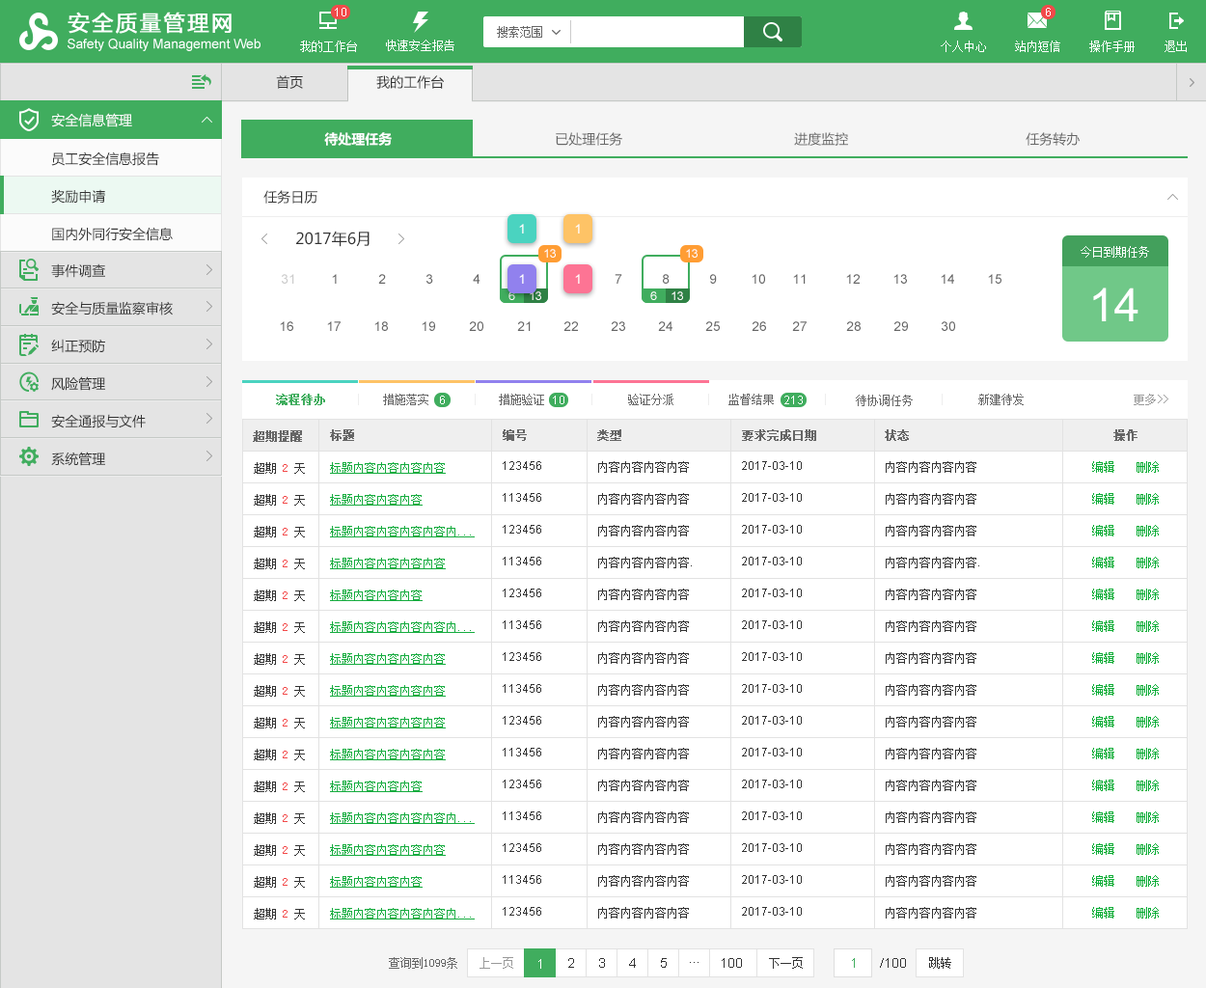
<style>
.page{position:relative;width:1206px;height:988px;background:#ffffff}
.page>*{position:absolute;margin:0}
.t1{font:13.5px "MicrosoftYaHei";color:#333333}
.t2{font:13.5px "MicrosoftYaHei";color:#ffffff}
.t3{font:13.5px "MicrosoftYaHei-Bold";color:#ffffff}
.t4{font:13.5px "MicrosoftYaHei";color:#666666}
.t5{font:13.5px/37.6px "MicrosoftYaHei";color:#333333}
.t6{font:15.4px "MicrosoftYaHei";color:#333333}
.t7{font:13.5px "ArialMT";color:#ffffff}
.t8{font:11.6px "ArialMT";color:#ffffff}
.t9{font:11.6px "SimSun";color:#ffffff}
.t10{font:13.5px "ArialMT";color:#cccccc}
.t11{font:13.5px "ArialMT";color:#666666}
.t12{font:11.6px "ArialMT";color:#fefefe}
.t13{font:46.3px "ArialMT";color:#ffffff}
.t14{font:11.6px "SimSun";color:#40ad5e;font-weight:bold}
.t15{font:11.6px "SimSun";color:#666666}
.t16{font:11.6px "SimSun";color:#999999}
.t17{font:11.6px "SimSun";color:#666666;font-weight:bold}
.t18{font:11.6px/31.9px "ArialMT";color:#333333}
.t19{font:11.6px/31.9px "SimSun";color:#333333}
.t20{font:11.6px/31.9px "SimSun";color:#09ac35}
.t21{font:11.6px/31.9px "SimSun";color:#f24a4a}
.t22{font:11.6px/31.9px "SimSun";color:#16ac3f;text-decoration:underline}
.t23{font:13.5px "ArialMT";color:#333333}
.t24{font:11.6px "SimSun";color:#333333}
.t25{font:13.5px "ArialMT";color:#40ad5e}
</style>
<div class="page">
<p class="t1" style="left:276px;top:75px;width:27px;height:14px">首页</p>
<p class="t1" style="left:376px;top:75px;width:68px;height:14px">我的工作台</p>
<p class="t2" style="left:51px;top:113px;width:81px;height:14px">安全信息管理</p>
<p class="t3" style="left:324px;top:132px;width:68px;height:14px">待处理任务</p>
<p class="t4" style="left:556px;top:132px;width:67px;height:14px">已处理任务</p>
<p class="t4" style="left:794px;top:132px;width:54px;height:14px">进度监控</p>
<p class="t4" style="left:1026px;top:132px;width:54px;height:14px">任务转办</p>
<p class="t5" style="left:51px;top:152px;width:122px;height:89px">员工安全信息报告<br>奖励申请<br>国内外同行安全信息</p>
<p class="t1" style="left:263px;top:190px;width:55px;height:14px">任务日历</p>
<p class="t6" style="left:296px;top:231px;width:74px;height:16px">2017年6月</p>
<p class="t7" style="left:519px;top:224px;width:5px;height:10px">1</p>
<p class="t7" style="left:575px;top:224px;width:5px;height:10px">1</p>
<p class="t8" style="left:544px;top:249px;width:12px;height:9px">13</p>
<p class="t8" style="left:686px;top:249px;width:12px;height:9px">13</p>
<p class="t9" style="left:1081px;top:246px;width:69px;height:12px">今日到期任务</p>
<p class="t5" style="left:51px;top:263px;width:122px;height:203px">事件调查<br>安全与质量监察审核<br>纠正预防<br>风险管理<br>安全通报与文件<br>系统管理</p>
<p class="t10" style="left:282px;top:274px;width:12px;height:10px">31</p>
<p class="t11" style="left:332px;top:274px;width:5px;height:10px">1</p>
<p class="t11" style="left:378px;top:274px;width:8px;height:10px">2</p>
<p class="t11" style="left:427px;top:274px;width:6px;height:10px">3</p>
<p class="t11" style="left:473px;top:274px;width:8px;height:10px">4</p>
<p class="t7" style="left:519px;top:274px;width:5px;height:10px">1</p>
<p class="t7" style="left:575px;top:274px;width:5px;height:10px">1</p>
<p class="t11" style="left:615px;top:274px;width:8px;height:10px">7</p>
<p class="t11" style="left:663px;top:274px;width:7px;height:10px">8</p>
<p class="t11" style="left:710px;top:274px;width:7px;height:10px">9</p>
<p class="t11" style="left:752px;top:274px;width:13px;height:10px">10</p>
<p class="t11" style="left:793px;top:274px;width:13px;height:10px">11</p>
<p class="t11" style="left:846px;top:274px;width:14px;height:10px">12</p>
<p class="t11" style="left:894px;top:274px;width:13px;height:10px">13</p>
<p class="t11" style="left:941px;top:274px;width:14px;height:10px">14</p>
<p class="t11" style="left:988px;top:274px;width:14px;height:10px">15</p>
<p class="t12" style="left:509px;top:291px;width:6px;height:9px">6</p>
<p class="t8" style="left:530px;top:291px;width:11px;height:9px">13</p>
<p class="t8" style="left:651px;top:291px;width:6px;height:9px">6</p>
<p class="t8" style="left:672px;top:291px;width:11px;height:9px">13</p>
<p class="t13" style="left:1094px;top:288px;width:45px;height:33px">14</p>
<p class="t11" style="left:280px;top:321px;width:13px;height:10px">16</p>
<p class="t11" style="left:327px;top:321px;width:14px;height:10px">17</p>
<p class="t11" style="left:374px;top:321px;width:14px;height:10px">18</p>
<p class="t11" style="left:422px;top:321px;width:13px;height:10px">19</p>
<p class="t11" style="left:469px;top:321px;width:15px;height:10px">20</p>
<p class="t11" style="left:517px;top:321px;width:14px;height:10px">21</p>
<p class="t11" style="left:564px;top:321px;width:14px;height:10px">22</p>
<p class="t11" style="left:611px;top:321px;width:14px;height:10px">23</p>
<p class="t11" style="left:658px;top:321px;width:15px;height:10px">24</p>
<p class="t11" style="left:706px;top:321px;width:14px;height:10px">25</p>
<p class="t11" style="left:752px;top:321px;width:14px;height:10px">26</p>
<p class="t11" style="left:792px;top:321px;width:15px;height:10px">27</p>
<p class="t11" style="left:846px;top:321px;width:15px;height:10px">28</p>
<p class="t11" style="left:894px;top:321px;width:14px;height:10px">29</p>
<p class="t11" style="left:942px;top:321px;width:14px;height:10px">30</p>
<p class="t14" style="left:276px;top:394px;width:49px;height:11px">流程待办</p>
<p class="t15" style="left:383px;top:394px;width:46px;height:11px">措施落实</p>
<p class="t8" style="left:440px;top:396px;width:5px;height:8px">6</p>
<p class="t15" style="left:499px;top:394px;width:45px;height:11px">措施验证</p>
<p class="t8" style="left:553px;top:396px;width:12px;height:8px">10</p>
<p class="t15" style="left:628px;top:394px;width:46px;height:11px">验证分派</p>
<p class="t15" style="left:729px;top:394px;width:45px;height:11px">监督结果</p>
<p class="t8" style="left:785px;top:396px;width:18px;height:8px">213</p>
<p class="t15" style="left:856px;top:395px;width:57px;height:11px">待协调任务</p>
<p class="t15" style="left:979px;top:394px;width:45px;height:11px">新建待发</p>
<p class="t16" style="left:1134px;top:394px;width:35px;height:11px">更多&gt;&gt;</p>
<p class="t17" style="left:253px;top:430px;width:49px;height:12px">超期提醒</p>
<p class="t17" style="left:330px;top:430px;width:24px;height:11px">标题</p>
<p class="t17" style="left:503px;top:430px;width:24px;height:11px">编号</p>
<p class="t17" style="left:597px;top:430px;width:25px;height:11px">类型</p>
<p class="t17" style="left:742px;top:430px;width:75px;height:11px">要求完成日期</p>
<p class="t17" style="left:885px;top:430px;width:24px;height:11px">状态</p>
<p class="t17" style="left:1114px;top:430px;width:24px;height:11px">操作</p>
<p class="t18" style="left:503px;top:461px;width:38px;height:455px">123456<br>113456<br>123456<br>113456<br>123456<br>113456<br>123456<br>113456<br>123456<br>113456<br>123456<br>113456<br>123456<br>113456<br>123456</p>
<p class="t19" style="left:598px;top:461px;width:94px;height:458px">内容内容内容内容<br>内容内容内容内容<br>内容内容内容内容<br>内容内容内容内容.<br>内容内容内容内容<br>内容内容内容内容<br>内容内容内容内容<br>内容内容内容内容<br>内容内容内容内容<br>内容内容内容内容<br>内容内容内容内容<br>内容内容内容内容<br>内容内容内容内容<br>内容内容内容内容<br>内容内容内容内容</p>
<p class="t18" style="left:742px;top:461px;width:60px;height:455px">2017-03-10 <br>2017-03-10 <br>2017-03-10 <br>2017-03-10 <br>2017-03-10 <br>2017-03-10 <br>2017-03-10 <br>2017-03-10 <br>2017-03-10 <br>2017-03-10 <br>2017-03-10 <br>2017-03-10 <br>2017-03-10 <br>2017-03-10 <br>2017-03-10</p>
<p class="t19" style="left:886px;top:461px;width:94px;height:458px">内容内容内容内容<br>内容内容内容内容<br>内容内容内容内容<br>内容内容内容内容.<br>内容内容内容内容<br>内容内容内容内容<br>内容内容内容内容<br>内容内容内容内容<br>内容内容内容内容<br>内容内容内容内容<br>内容内容内容内容<br>内容内容内容内容<br>内容内容内容内容<br>内容内容内容内容<br>内容内容内容内容</p>
<p class="t20" style="left:1093px;top:461px;width:22px;height:458px">编辑<br>编辑<br>编辑<br>编辑<br>编辑<br>编辑<br>编辑<br>编辑<br>编辑<br>编辑<br>编辑<br>编辑<br>编辑<br>编辑<br>编辑</p>
<p class="t20" style="left:1137px;top:461px;width:22px;height:458px">删除<br>删除<br>删除<br>删除<br>删除<br>删除<br>删除<br>删除<br>删除<br>删除<br>删除<br>删除<br>删除<br>删除<br>删除</p>
<p class="t19" style="left:254px;top:462px;width:51px;height:458px">超期 <span class="t21">2 </span>天<br>超期 <span class="t21">2 </span>天<br>超期 <span class="t21">2 </span>天<br>超期 <span class="t21">2 </span>天<br>超期 <span class="t21">2 </span>天<br>超期 <span class="t21">2 </span>天<br>超期 <span class="t21">2 </span>天<br>超期 <span class="t21">2 </span>天<br>超期 <span class="t21">2 </span>天<br>超期 <span class="t21">2 </span>天<br>超期 <span class="t21">2 </span>天<br>超期 <span class="t21">2 </span>天<br>超期 <span class="t21">2 </span>天<br>超期 <span class="t21">2 </span>天<br>超期 <span class="t21">2 </span>天</p>
<p class="t22" style="left:330px;top:462px;width:145px;height:458px">标题内容内容内容内容<br>标题内容内容内容<br>标题内容内容内容内容内...<br>标题内容内容内容内容<br>标题内容内容内容<br>标题内容内容内容内容内...<br>标题内容内容内容内容<br>标题内容内容内容内容<br>标题内容内容内容内容<br>标题内容内容内容内容<br>标题内容内容内容<br>标题内容内容内容内容内...<br>标题内容内容内容内容<br>标题内容内容内容<br>标题内容内容内容内容内...</p>
<p class="t15" style="left:389px;top:957px;width:68px;height:12px">查询到1099条</p>
<p class="t16" style="left:480px;top:957px;width:33px;height:12px">上一页</p>
<p class="t7" style="left:539px;top:959px;width:2px;height:10px">1</p>
<p class="t23" style="left:568px;top:958px;width:6px;height:10px">2</p>
<p class="t23" style="left:599px;top:958px;width:6px;height:10px">3</p>
<p class="t23" style="left:629px;top:958px;width:7px;height:10px">4</p>
<p class="t23" style="left:661px;top:958px;width:6px;height:10px">5</p>
<p class="t23" style="left:690px;top:962px;width:9px;height:1px">...</p>
<p class="t23" style="left:722px;top:958px;width:20px;height:10px">100</p>
<p class="t24" style="left:769px;top:957px;width:34px;height:12px">下一页</p>
<p class="t25" style="left:852px;top:958px;width:3px;height:10px">1</p>
<p class="t23" style="left:880px;top:958px;width:26px;height:10px">/100</p>
<p class="t24" style="left:929px;top:957px;width:23px;height:12px">跳转</p>
</div>
